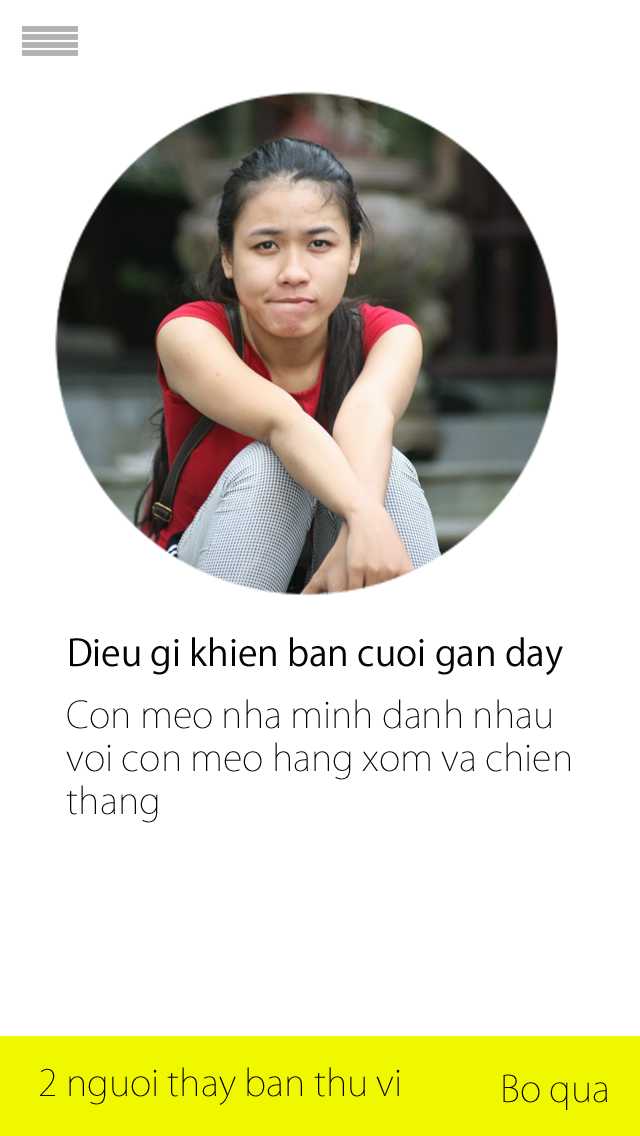
<style>
.page{position:relative;width:640px;height:1136px;background:#ffffff}
.page>*{position:absolute;margin:0}
.t1{font:36px "KozGoPro-Regular";color:#040404}
.t2{font:36px "KozGoPro-ExtraLight";color:#040404}
.t3{font:36px "KozGoPro-ExtraLight";color:#020202}
</style>
<div class="page">
<p class="t1" style="left:70px;top:637px;width:493px;height:38px">Dieu gi khien ban cuoi gan day</p>
<p class="t2" style="left:66px;top:699px;width:504px;height:124px">Con meo nha minh danh nhau <br>voi con meo hang xom va chien <br>thang</p>
<p class="t3" style="left:40px;top:1067px;width:360px;height:38px">2 nguoi thay ban thu vi</p>
<p class="t3" style="left:503px;top:1074px;width:104px;height:36px">Bo qua</p>
</div>
